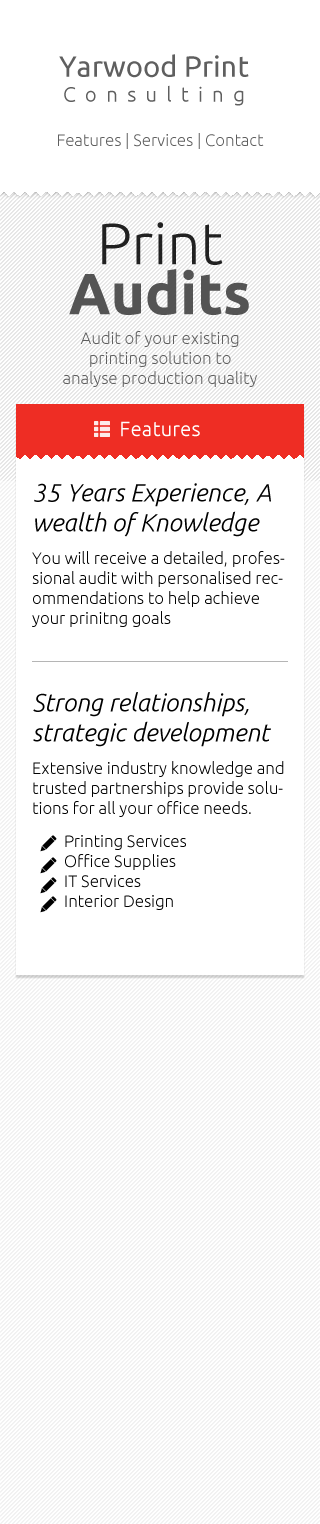
<style>
.page{position:relative;width:320px;height:1524px;background:#ffffff}
.page>*{position:absolute;margin:0}
.t1{font:29.2px "Ubuntu";color:#5f5f5f}
.t2{font:20.8px "Ubuntu-Light";letter-spacing:0.44em;color:#5f5f5f}
.t3{font:16.7px "Ubuntu-Light";color:#5f5f5f}
.t4{font:58.3px/50px "Ubuntu-Bold";color:#545454}
.t5{font:58.3px/50px "Ubuntu-Light";color:#212121}
.t6{font:20.8px "Ubuntu-Light";color:#ffffff}
.t7{font:25px "Ubuntu-LightItalic";color:#010101}
.t8{font:16.7px "Ubuntu-Light";color:#010101}
</style>
<div class="page">
<p class="t1" style="left:59px;top:54px;width:190px;height:52px;text-align:center">Yarwood Print<br><span class="t2">Consulting</span></p>
<p class="t3" style="left:58px;top:133px;width:206px;height:16px">Features | Services | Contact</p>
<p class="t4" style="left:69px;top:222px;width:180px;height:93px;text-align:center"><span class="t5">Print <br></span>Audits</p>
<p class="t3" style="left:63px;top:331px;width:194px;height:56px;text-align:center">Audit of your existing<br>printing solution to <br>analyse production quality</p>
<p class="t6" style="left:121px;top:421px;width:79px;height:16px">Features</p>
<p class="t7" style="left:34px;top:483px;width:237px;height:54px">35 Years Experience, A wealth of Knowledge</p>
<p class="t8" style="left:32px;top:551px;width:253px;height:76px">You will receive a detailed, professional audit with personalised recommendations to help achieve your prinitng goals</p>
<p class="t7" style="left:33px;top:692px;width:238px;height:55px">Strong relationships, strategic development</p>
<p class="t8" style="left:33px;top:761px;width:251px;height:56px">Extensive industry knowledge and trusted partnerships provide solutions for all your office needs.</p>
<p class="t8" style="left:65px;top:835px;width:121px;height:75px">Printing Services<br>Office Supplies<br>IT Services<br>Interior Design</p>
</div>
